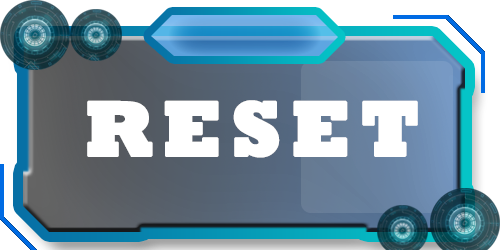
<style>
.page{position:relative;width:500px;height:250px}
.page>*{position:absolute;margin:0}
.t1{font:79px "Rockwell-ExtraBold";letter-spacing:0.1em;color:#ffffff;font-weight:bold}
</style>
<div class="page">
<p class="t1" style="left:87px;top:100px;width:331px;height:58px">RESET</p>
</div>
